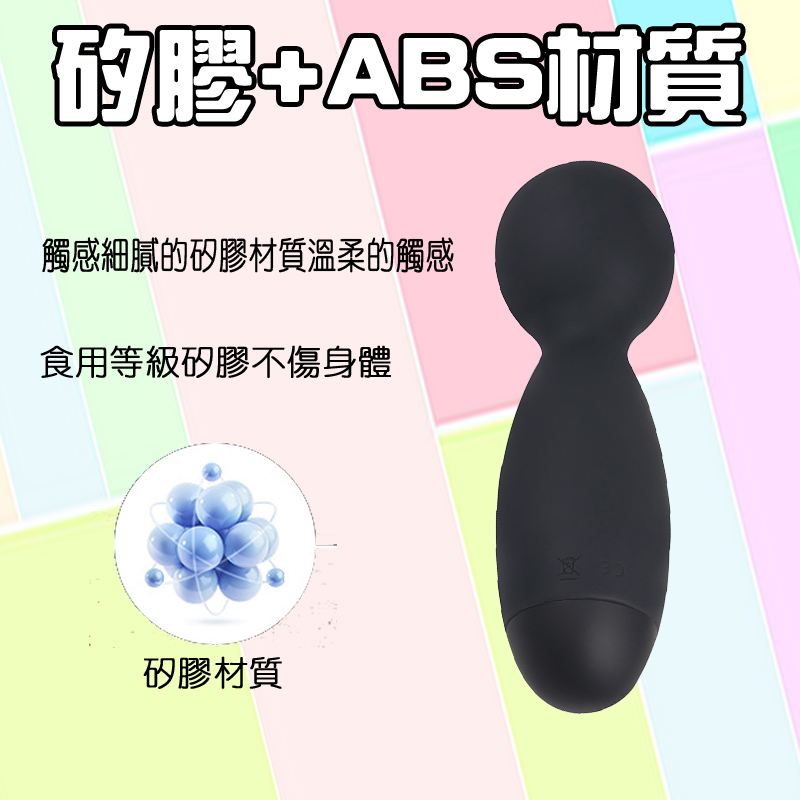
<style>
.page{position:relative;width:800px;height:800px;background:#feeeee}
.page>*{position:absolute;margin:0}
.t1{font:97.8px "HanWangZonYi";color:#ffffff;font-weight:bold}
.t2{font:37.2px "HanWangYenLight";color:#000000;font-weight:bold;scale:0.77 1}
.t3{font:34.4px "HanWangYenLight";color:#000000;font-weight:bold}
</style>
<div class="page">
<p class="t1" style="left:56px;top:27px;width:686px;height:95px">矽膠+ABS材質</p>
<p class="t2" style="left:42px;top:237px;width:412px;height:36px">觸感細膩的矽膠材質溫柔的觸感</p>
<p class="t3" style="left:40px;top:345px;width:351px;height:33px">食用等級矽膠不傷身體</p>
<p class="t3" style="left:143px;top:656px;width:139px;height:33px">矽膠材質</p>
</div>
